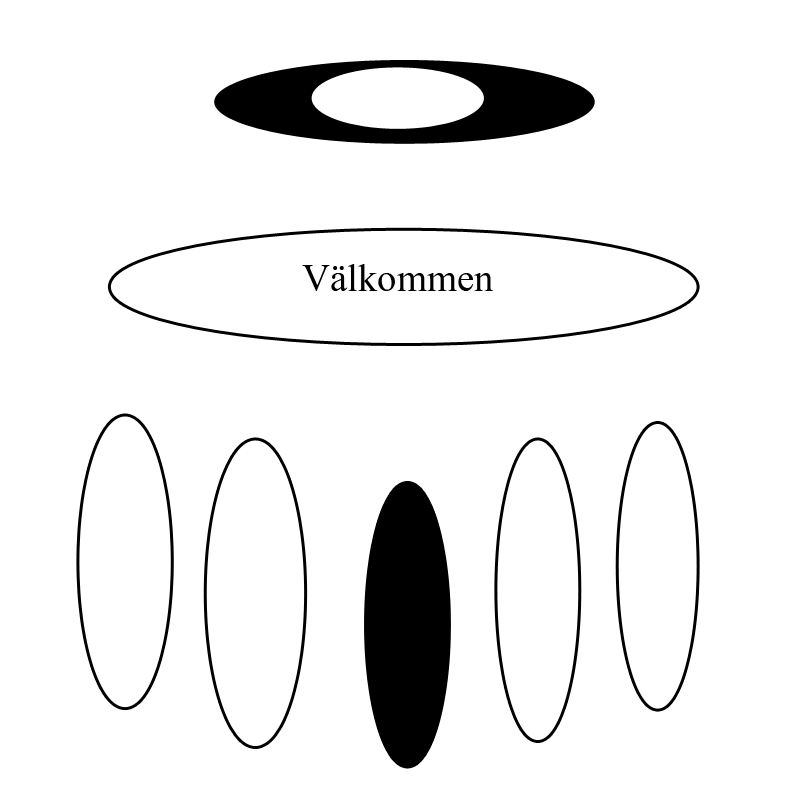
<style>
.page{position:relative;width:800px;height:800px;background:#ffffff}
.page>*{position:absolute;margin:0}
.t1{font:48px "Aparajita";color:#000000}
</style>
<div class="page">
<p class="t1" style="left:302px;top:264px;width:192px;height:27px">Välkommen</p>
</div>
